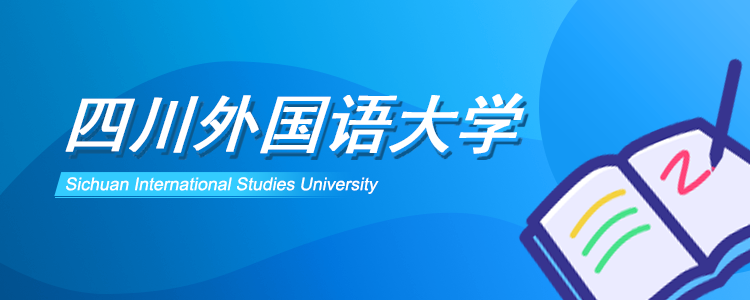
<style>
.page{position:relative;width:750px;height:300px}
.page>*{position:absolute;margin:0}
.t1{font:66.5px "SimHei";color:#ffffff;font-weight:bold;scale:0.95 1}
.t2{font:17.7px "ArialMT";color:#ffffff;font-style:italic}
</style>
<div class="page">
<p class="t1" style="left:65px;top:93px;width:460px;height:61px">四川外国语大学</p>
<p class="t2" style="left:66px;top:177px;width:313px;height:17px">Sichuan International Studies University</p>
</div>
